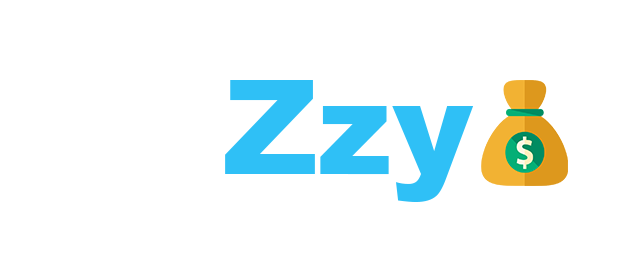
<style>
.page{position:relative;width:625px;height:257px;background:#ffffff}
.page>*{position:absolute;margin:0}
.t1{font:132px "Arial-Black";color:#2fc0f6}
.t2{font:132px "Arial-Black";color:#ffffff}
</style>
<div class="page">
<p class="t1" style="left:41px;top:80px;width:433px;height:122px"><span class="t2">Bu</span>Zzy</p>
</div>
